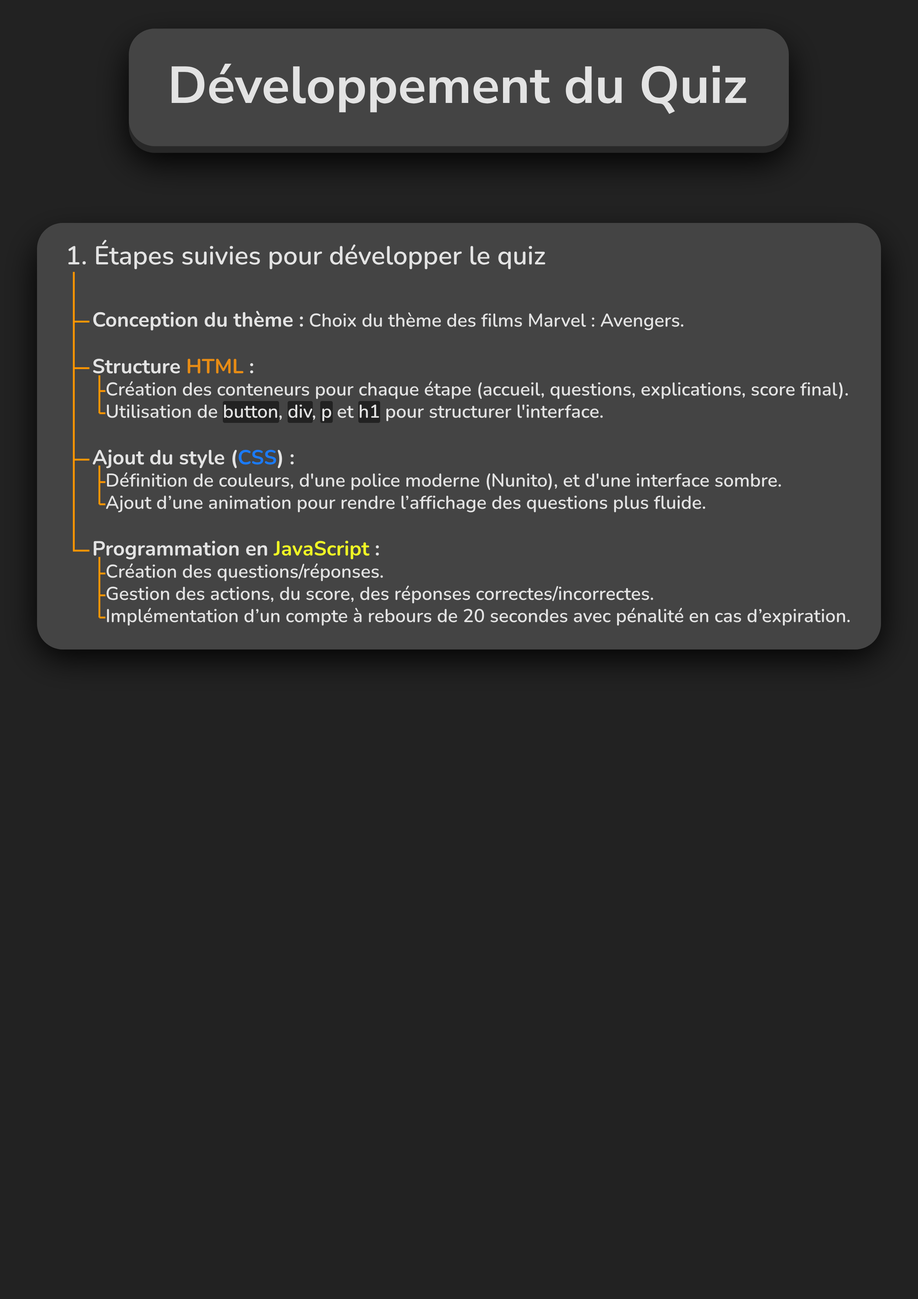
<style>
.page{position:relative;width:918px;height:1299px;background:#222222}
.page>*{position:absolute;margin:0}
.t1{font:51.8px "NunitoSans-Bold";color:#e3e3e3}
.t2{font:18.5px "Nunito-SemiBold";color:#e3e3e3}
.t3{font:25.9px "Nunito-SemiBold";color:#e3e3e3}
.t4{font:20.4px "Nunito-Bold";color:#e3e3e3}
.t5{font:20.4px "Nunito-Bold";color:#e78c15}
.t6{font:20.4px "Nunito-Bold";color:#1b7bfc}
.t7{font:20.4px "Nunito-Bold";color:#eff625}
</style>
<div class="page">
<p class="t1" style="left:171px;top:64px;width:575px;height:50px">Développement du Quiz</p>
<p class="t2" style="left:68px;top:240px;width:782px;height:386px"><span class="t3">1. Étapes suivies pour développer le quiz<br><br>  </span><span class="t4">Conception du thème :</span> Choix du thème des films Marvel : Avengers.<br><br>  <span class="t4">Structure </span><span class="t5">HTML</span><span class="t4"> :<br>   </span>Création des conteneurs pour chaque étape (accueil, questions, explications, score final).<br>   Utilisation de button, div, p et h1 pour structurer l'interface.<br><br>  <span class="t4">Ajout du style (</span><span class="t6">CSS</span><span class="t4">) :<br>   </span>Définition de couleurs, d'une police moderne (Nunito), et d'une interface sombre.<br>   Ajout d’une animation pour rendre l’affichage des questions plus fluide.<br><br>  <span class="t4">Programmation en </span><span class="t7">JavaScript</span><span class="t4"> :<br>   </span>Création des questions/réponses.<br>   Gestion des actions, du score, des réponses correctes/incorrectes.<br>   Implémentation d’un compte à rebours de 20 secondes avec pénalité en cas d’expiration.</p>
</div>
